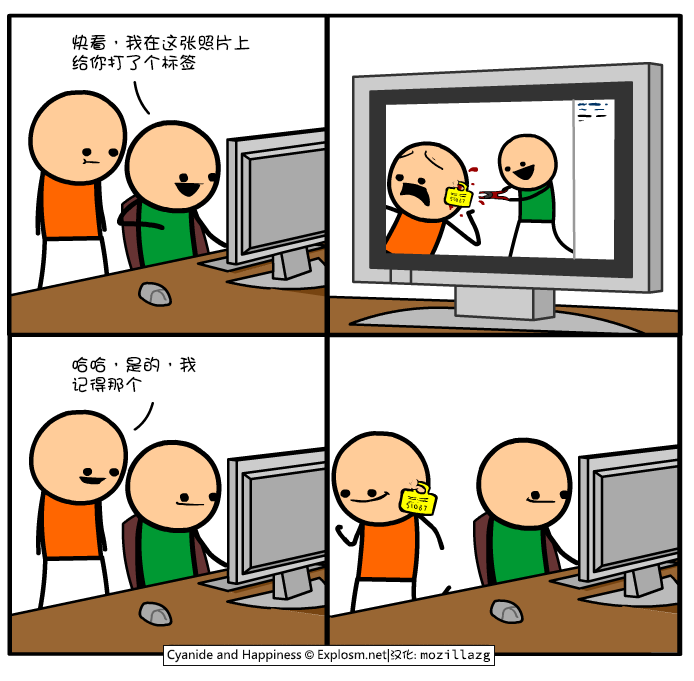
<style>
.page{position:relative;width:694px;height:681px;background:#ffffff}
.page>*{position:absolute;margin:0}
.t1{font:18px/20px "DFGirl";color:#000000}
</style>
<div class="page">
<p class="t1" style="left:72px;top:34px;width:178px;height:37px">快看，我在这张照片上<br>给你打了个标签</p>
<p class="t1" style="left:72px;top:356px;width:124px;height:37px">哈哈，是的，我<br>记得那个</p>
</div>
